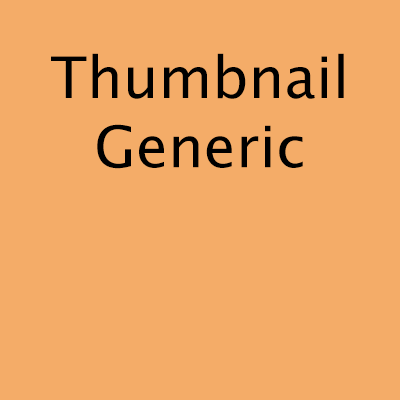
<style>
.page{position:relative;width:400px;height:400px;background:#f4ac68}
.page>*{position:absolute;margin:0}
.t1{font:57.6px "LucidaSansUnicode";color:#000000}
</style>
<div class="page">
<p class="t1" style="left:51px;top:53px;width:293px;height:116px;text-align:center">Thumbnail<br>Generic</p>
</div>
